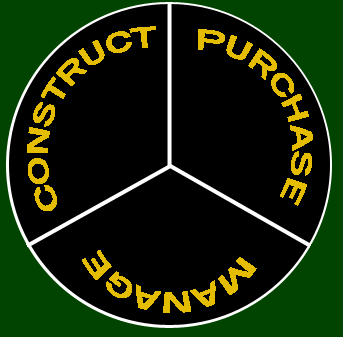
<style>
.page{position:relative;width:343px;height:337px;background:#000000}
.page>*{position:absolute;margin:0}
.t1{font:30px "FranklinGothic-Medium";color:#e4bd00}
</style>
<div class="page">
<p class="t1" style="left:27px;top:26px;width:129px;height:185px;rotate:-59deg">CONSTRUCT</p>
<p class="t1" style="left:198px;top:29px;width:115px;height:177px;rotate:61deg">PURCHASE</p>
<p class="t1" style="left:82px;top:250px;width:175px;height:63px;rotate:-177deg">MANAGE</p>
</div>
